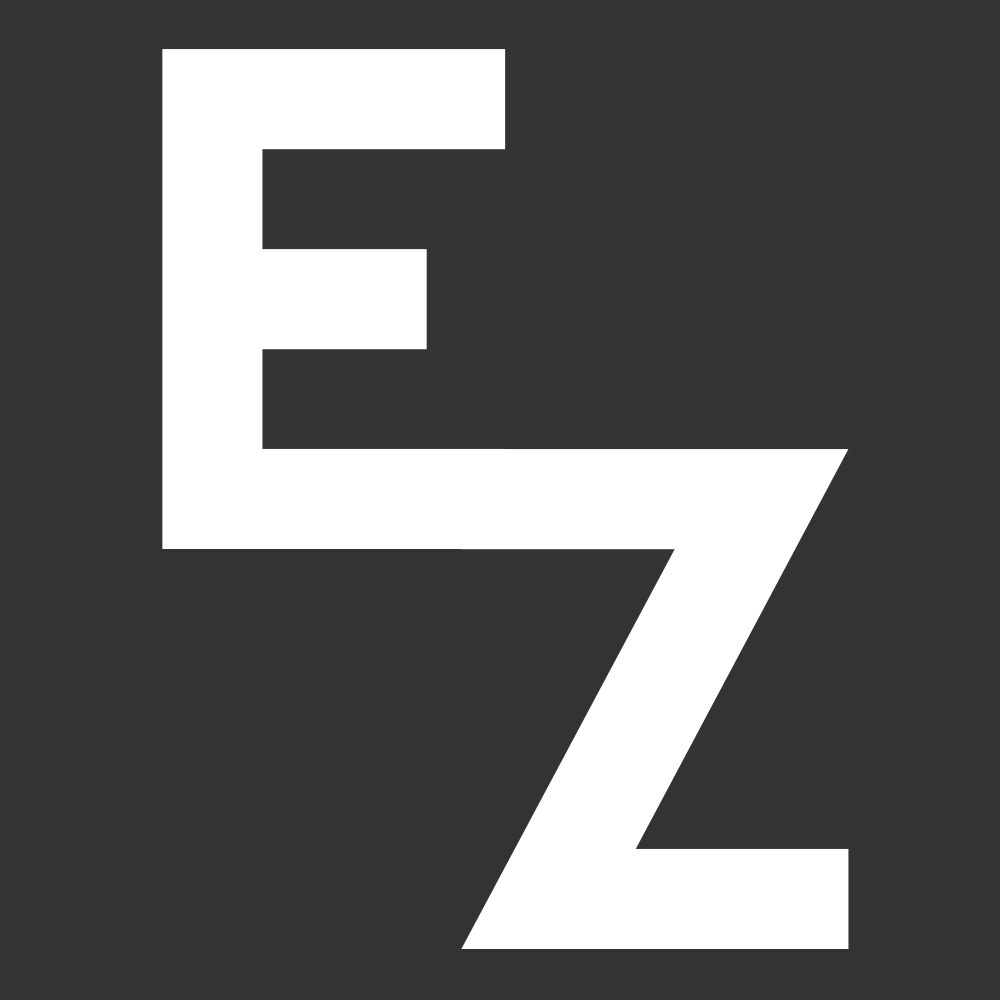
<style>
.page{position:relative;width:1000px;height:1000px;background:#333333}
.page>*{position:absolute;margin:0}
.t1{font:713.7px "Righteous-Regular";color:#ffffff}
</style>
<div class="page">
<p class="t1" style="left:162px;top:49px;width:344px;height:500px">E</p>
<p class="t1" style="left:461px;top:449px;width:388px;height:500px">Z</p>
</div>
